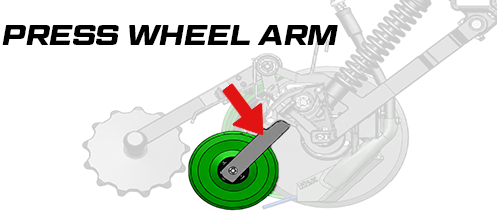
<style>
.page{position:relative;width:497px;height:218px;background:#ffffff}
.page>*{position:absolute;margin:0}
.t1{font:28.3px "GeomGraphic-BoldItalic";color:#000000;text-transform:uppercase}
</style>
<div class="page">
<p class="t1" style="left:2px;top:25px;width:336px;height:20px">press wheel arm</p>
</div>
